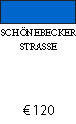
<style>
.page{position:relative;width:76px;height:124px;background:#ffffff}
.page>*{position:absolute;margin:0}
.t1{font:11.5px "AdobeDevanagari-Regular";color:#000000;scale:0.9 1}
.t2{font:14px "MyriadPro-Regular";color:#000000}
</style>
<div class="page">
<p class="t1" style="left:1px;top:27px;width:75px;height:23px;text-align:center">SCHÖNEBECKER<br>STRASSE</p>
<p class="t2" style="left:23px;top:105px;width:31px;height:10px">€ 120</p>
</div>
